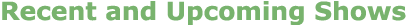
<style>
.page{position:relative;width:408px;height:25px;background:#ffffff}
.page>*{position:absolute;margin:0}
.t1{font:25px "Verdana-Bold";color:#78b36d}
</style>
<div class="page">
<p class="t1" style="left:2px;top:1px;width:404px;height:24px">Recent and Upcoming Shows</p>
</div>
